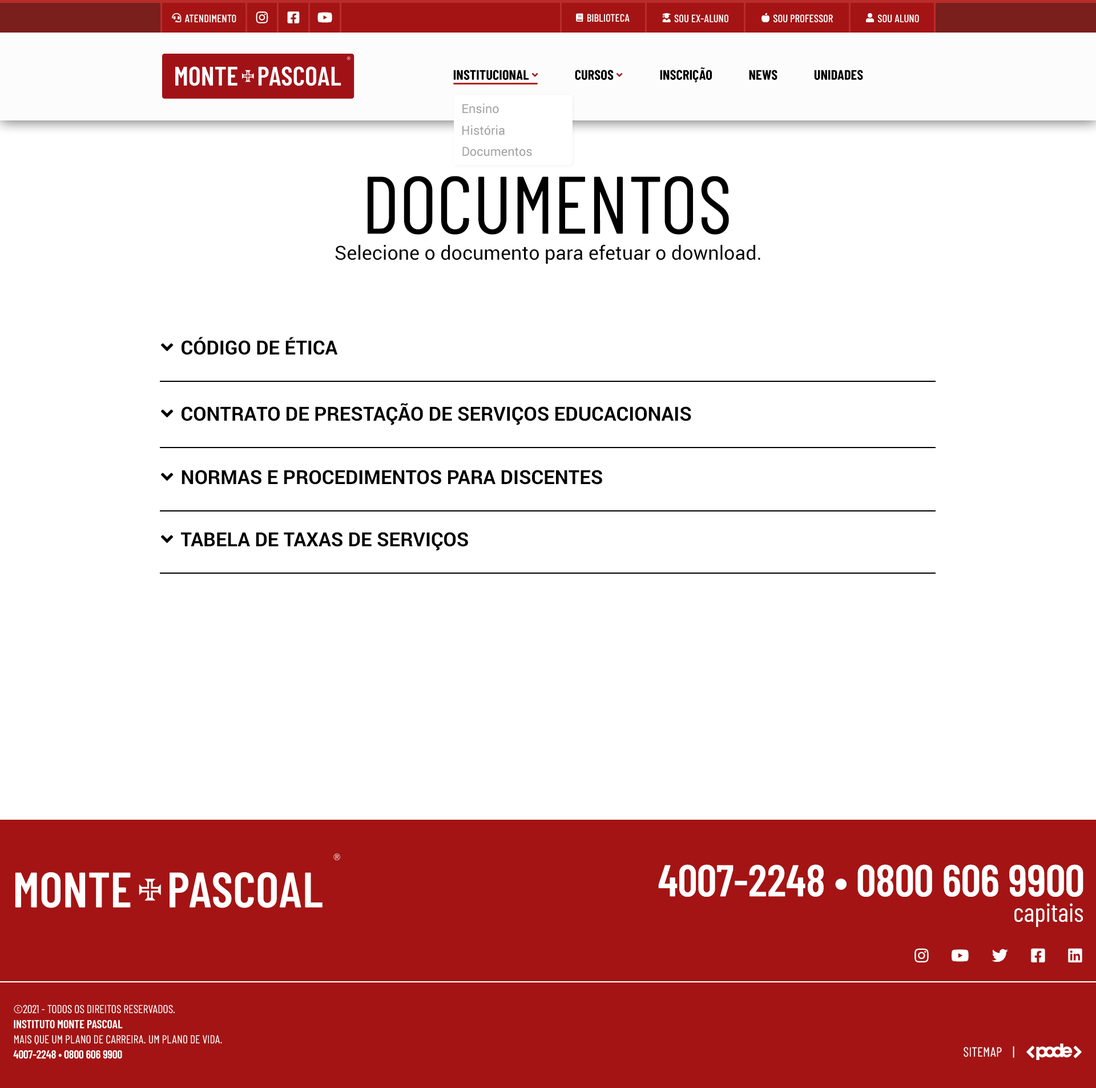
<style>
.page{position:relative;width:1096px;height:1088px;background:#ffffff}
.page>*{position:absolute;margin:0}
.t1{font:14px "BarlowCondensed-Bold";color:#000000;text-transform:uppercase}
.t2{font:12.4px "Roboto-Regular";color:#a1a1a1}
.t3{font:81.4px "BarlowCondensed-Regular";color:#000000;text-transform:uppercase}
.t4{font:19.4px "Roboto-Regular";color:#000000}
.t5{font:44.5px "BarlowCondensed-SemiBold";color:#ffffff;text-transform:uppercase}
.t6{font:26.1px "BarlowCondensed-Regular";color:#ffffff}
.t7{font:11.4px/7.6px "BarlowCondensed-Regular";color:#ffffff;text-transform:uppercase}
.t8{font:11.4px/7.6px "BarlowCondensed-SemiBold";color:#ffffff;text-transform:uppercase}
.t9{font:13.3px "BarlowCondensed-Regular";color:#ffffff;text-transform:uppercase}
</style>
<div class="page">
<p class="t1" style="left:660px;top:67px;width:52px;height:16px">Inscrição</p>
<p class="t1" style="left:749px;top:70px;width:28px;height:10px">News</p>
<p class="t1" style="left:814px;top:70px;width:49px;height:10px">Unidades</p>
<p class="t2" style="left:462px;top:103px;width:37px;height:11px">Ensino</p>
<p class="t2" style="left:462px;top:125px;width:43px;height:10px">História</p>
<p class="t2" style="left:462px;top:147px;width:70px;height:9px">Documentos</p>
<p class="t3" style="left:368px;top:176px;width:361px;height:59px">DOCUMENTOS</p>
<p class="t4" style="left:335px;top:244px;width:425px;height:20px">Selecione o documento para efetuar o download.</p>
<p class="t5" style="left:658px;top:864px;width:425px;height:33px">4007-2248 • 0800 606 9900</p>
<p class="t6" style="left:1014px;top:903px;width:69px;height:24px">capitais</p>
<p class="t7" style="left:13px;top:1005px;width:209px;height:54px">©2021 - Todos os direitos reservados.<br><br><span class="t8">Instituto Monte Pascoal<br></span><br>Mais que um plano de carreira. Um plano de vida.<br><br><span class="t8">4007-2248 • 0800 606 9900</span></p>
<p class="t9" style="left:964px;top:1046px;width:50px;height:12px">SITEMAP    |</p>
</div>
